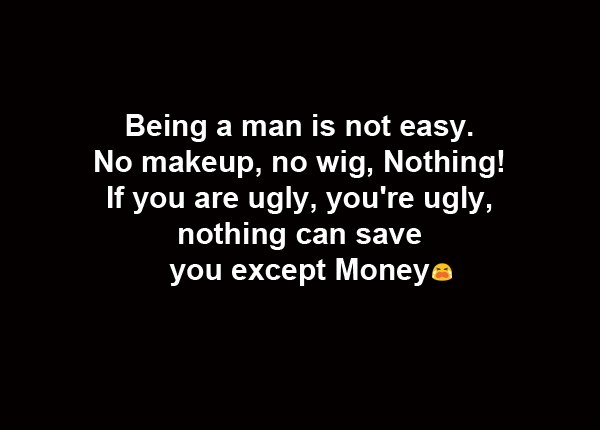
<style>
.page{position:relative;width:600px;height:430px;background:#040000}
.page>*{position:absolute;margin:0}
.t1{font:30px "Arial-BoldMT";color:#ffffff}
</style>
<div class="page">
<p class="t1" style="left:95px;top:114px;width:409px;height:172px;text-align:center">Being a man is not easy. <br>No makeup, no wig, Nothing! <br>If you are ugly, you're ugly, <br>nothing can save <br>you except Money</p>
</div>
